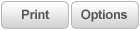
<style>
.page{position:relative;width:140px;height:30px}
.page>*{position:absolute;margin:0}
.t1{font:13px "Arial-BoldMT";letter-spacing:-0.025em;color:#555555}
</style>
<div class="page">
<p class="t1" style="left:22px;top:9px;width:28px;height:10px">Print</p>
<p class="t1" style="left:81px;top:9px;width:46px;height:13px">Options</p>
</div>
